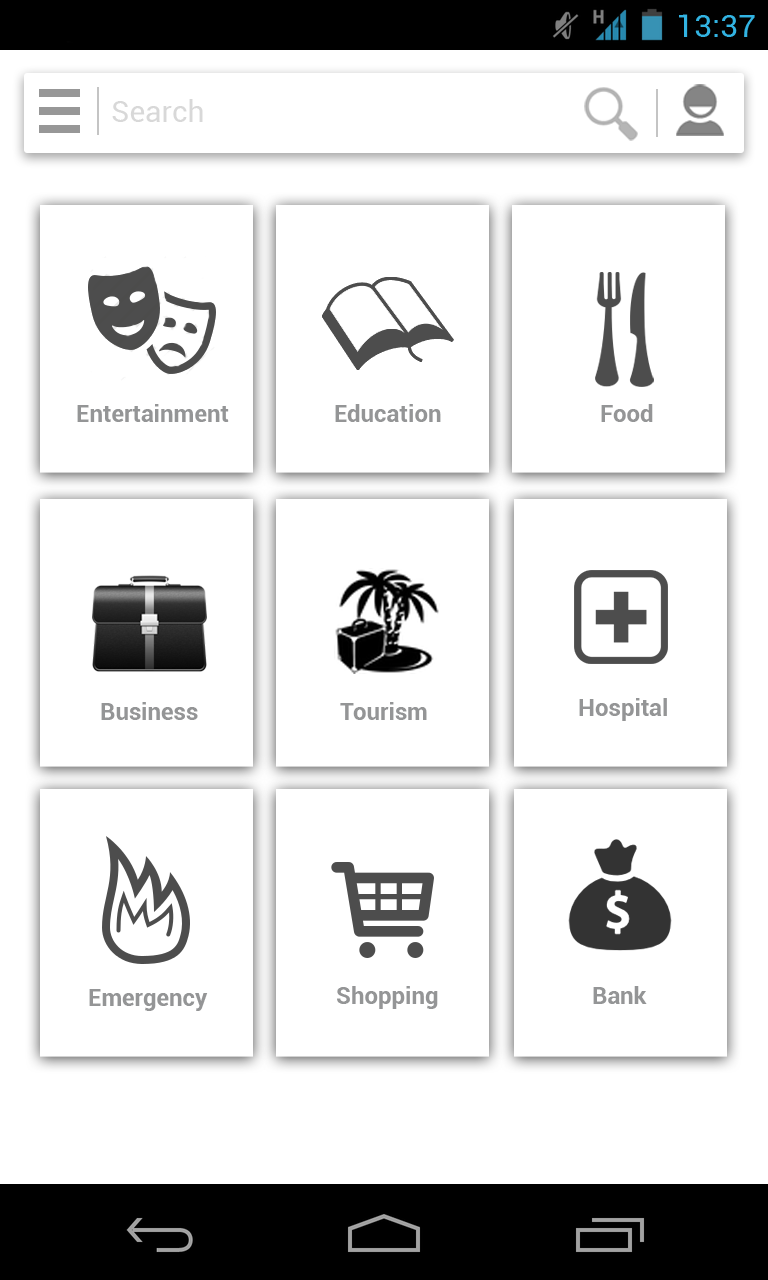
<style>
.page{position:relative;width:768px;height:1280px;background:#ffffff}
.page>*{position:absolute;margin:0}
.t1{font:24px "Roboto-Bold";color:#949596}
</style>
<div class="page">
<p class="t1" style="left:77px;top:404px;width:152px;height:18px">Entertainment</p>
<p class="t1" style="left:335px;top:404px;width:106px;height:18px">Education</p>
<p class="t1" style="left:601px;top:404px;width:52px;height:18px">Food</p>
<p class="t1" style="left:101px;top:702px;width:97px;height:18px">Business</p>
<p class="t1" style="left:340px;top:702px;width:87px;height:18px">Tourism</p>
<p class="t1" style="left:579px;top:698px;width:88px;height:23px">Hospital</p>
<p class="t1" style="left:89px;top:989px;width:119px;height:22px">Emergency</p>
<p class="t1" style="left:337px;top:986px;width:101px;height:23px">Shopping</p>
<p class="t1" style="left:593px;top:986px;width:54px;height:18px">Bank</p>
</div>
